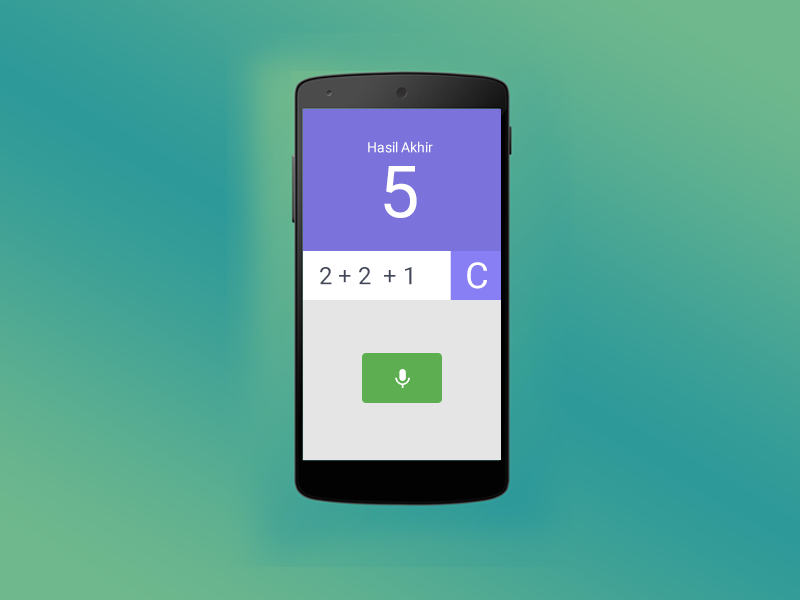
<style>
.page{position:relative;width:800px;height:600px}
.page>*{position:absolute;margin:0}
.t1{font:14px "Roboto-Regular";color:#ffffff}
.t2{font:72px "Roboto-Regular";color:#ffffff}
.t3{font:24px "Roboto-Regular";color:#42485a}
.t4{font:36px "Roboto-Regular";color:#ffffff}
</style>
<div class="page">
<p class="t1" style="left:368px;top:141px;width:65px;height:12px">Hasil Akhir</p>
<p class="t2" style="left:384px;top:166px;width:33px;height:52px">5</p>
<p class="t3" style="left:320px;top:267px;width:92px;height:18px">2 + 2  + 1</p>
<p class="t4" style="left:467px;top:262px;width:20px;height:27px">C</p>
</div>
